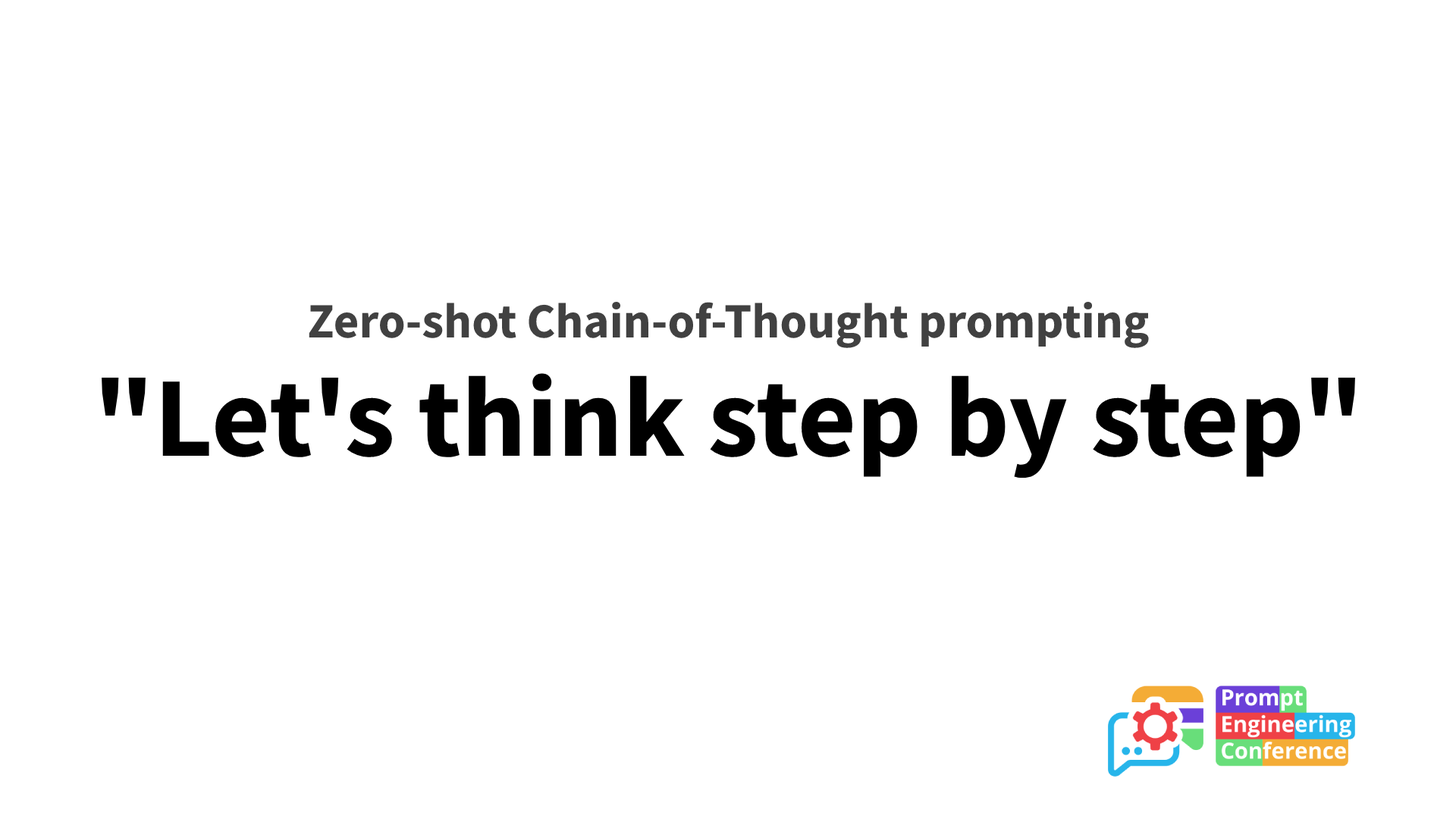
<style>
.page{position:relative;width:1456px;height:819px;background:#ffffff}
.page>*{position:absolute;margin:0}
.t1{font:49.3px "SourceSansPro-Bold";color:#414141}
.t2{font:113.7px "SourceSansPro-Bold";color:#000000}
</style>
<div class="page">
<p class="t1" style="left:309px;top:302px;width:840px;height:46px">Zero-shot Chain-of-Thought prompting</p>
<p class="t2" style="left:102px;top:373px;width:1253px;height:106px">"Let's think step by step"</p>
</div>
